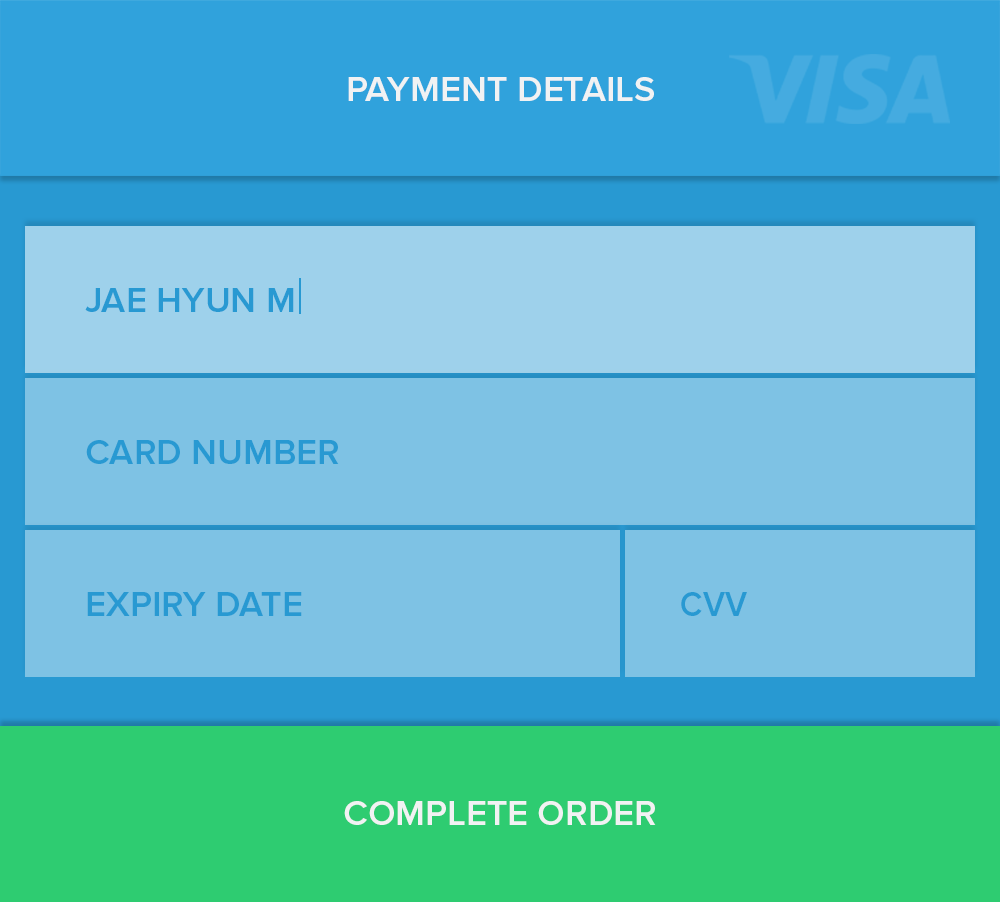
<style>
.page{position:relative;width:1000px;height:902px;background:#7ec2e4}
.page>*{position:absolute;margin:0}
.t1{font:36px "ProximaNova-Semibold";color:#f1f2f3}
.t2{font:36px "ProximaNova-Semibold";color:#2899d2}
.t3{font:36px "ProximaNova-Semibold";color:#2899d2;scale:0.92 1}
</style>
<div class="page">
<p class="t1" style="left:348px;top:77px;width:306px;height:24px">PAYMENT DETAILS</p>
<p class="t2" style="left:85px;top:288px;width:209px;height:24px">JAE HYUN M</p>
<p class="t2" style="left:86px;top:440px;width:253px;height:24px">CARD NUMBER</p>
<p class="t2" style="left:87px;top:592px;width:215px;height:24px">EXPIRY DATE</p>
<p class="t3" style="left:681px;top:592px;width:66px;height:24px">CVV</p>
<p class="t1" style="left:344px;top:801px;width:312px;height:24px">COMPLETE ORDER</p>
</div>
